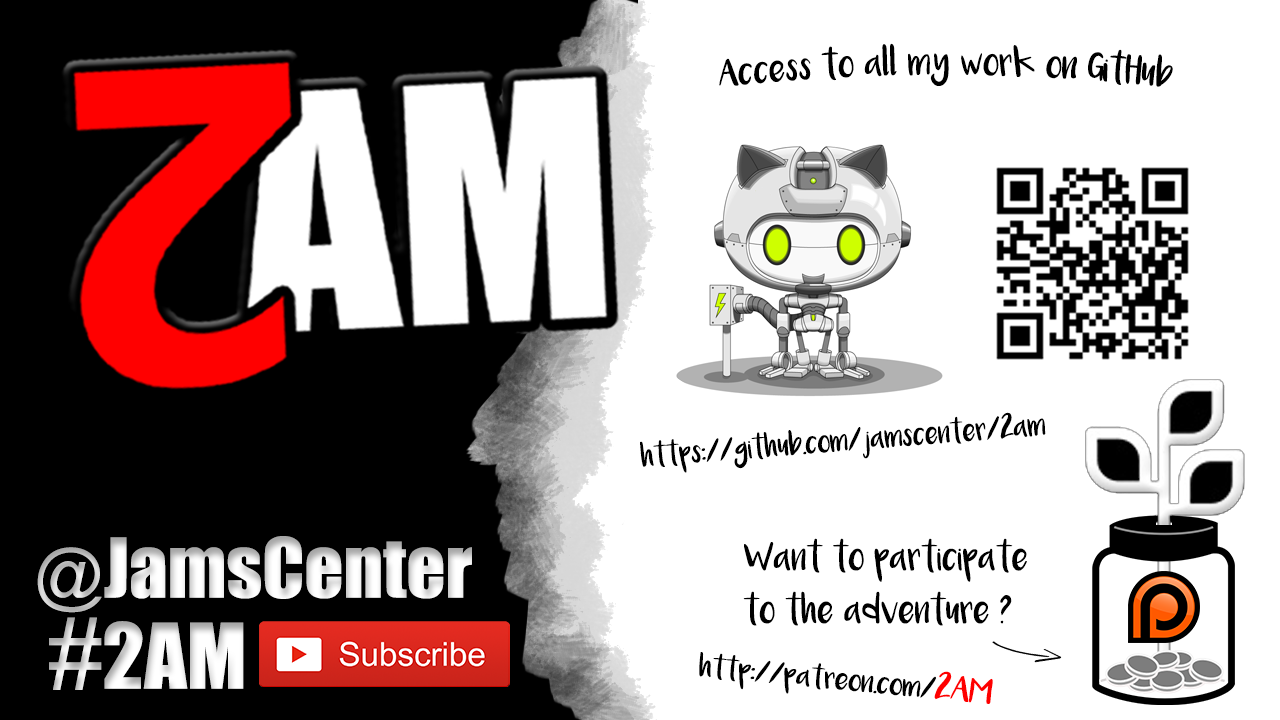
<style>
.page{position:relative;width:1280px;height:720px;background:#ffffff}
.page>*{position:absolute;margin:0}
.t1{font:21.2px/52.9px "Luna";color:#000000}
.t2{font:16.9px "Luna";color:#000000}
.t3{font:76.2px "Impact"}
.t4{font:68.8px "ArialMT"}
.t5{font:83.6px "Impact";color:#ffffff}
.t6{font:97.4px "ArialMT";color:#ffffff}
.t7{font:16.4px "Luna";color:#000000;scale:1.07 1}
.t8{font:18.8px "Luna";color:#fe0000;scale:1.07 1}
</style>
<div class="page">
<p class="t1" style="left:719px;top:43px;width:454px;height:44px">Access to all my work on GitHub</p>
<p class="t2" style="left:640px;top:412px;width:406px;height:61px;rotate:-4deg">https://github.com/jamscenter/2am</p>
<p class="t3" style="left:37px;top:536px;width:435px;height:77px"><span class="t4">@</span>JamsCenter</p>
<p class="t1" style="left:743px;top:538px;width:284px;height:88px">Want to participate<br>to the adventure ?</p>
<p class="t5" style="left:49px;top:617px;width:195px;height:73px"><span class="t6">#</span>2AM</p>
<p class="t7" style="left:699px;top:652px;width:294px;height:52px;rotate:5deg">http://patreon.com/<span class="t8">2AM</span></p>
</div>
